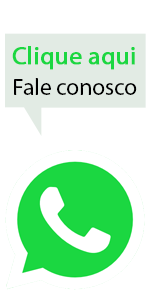
<style>
.page{position:relative;width:150px;height:300px;background:#ffffff}
.page>*{position:absolute;margin:0}
.t1{font:25px "MyriadPro-Regular";color:#1bd741;font-weight:bold}
.t2{font:23.3px "MyriadPro-Regular";color:#000000}
</style>
<div class="page">
<p class="t1" style="left:12px;top:46px;width:123px;height:24px">Clique aqui</p>
<p class="t2" style="left:14px;top:78px;width:123px;height:17px">Fale conosco</p>
</div>
